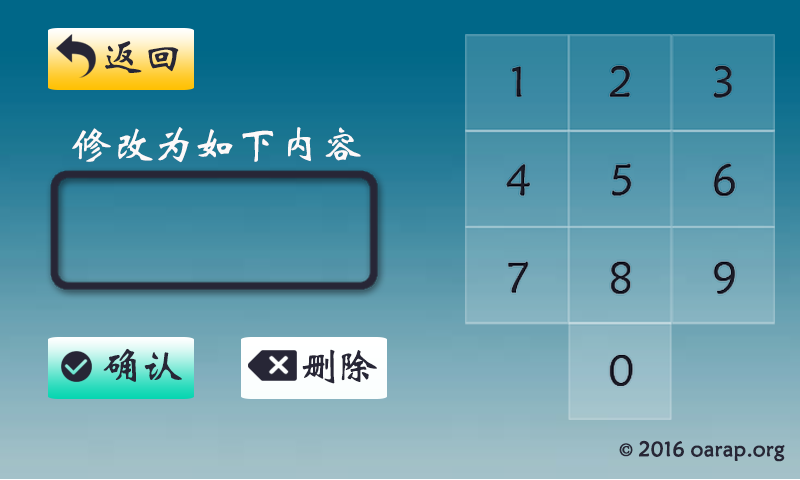
<style>
.page{position:relative;width:800px;height:480px}
.page>*{position:absolute;margin:0}
.t1{font:41.7px "STXinwei";color:#272636}
.t2{font:41.7px "STXinwei";color:#fdf9f9}
.t3{font:41.7px "STXinwei";letter-spacing:-0.14em;color:#272636}
.t4{font:20.8px "STXinwei";color:#272636;font-weight:bold}
.t5{font:20.8px "AdobeSongStd-Light";color:#272636;font-weight:bold}
</style>
<div class="page">
<p class="t1" style="left:105px;top:41px;width:74px;height:32px">返回</p>
<p class="t2" style="left:72px;top:127px;width:289px;height:36px">修改为如下内容</p>
<p class="t1" style="left:103px;top:348px;width:79px;height:34px">确认</p>
<p class="t3" style="left:302px;top:349px;width:75px;height:35px">删除</p>
<p class="t4" style="left:619px;top:440px;width:166px;height:22px"><span class="t5">© </span>2016 oarap.org</p>
</div>
